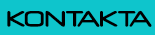
<style>
.page{position:relative;width:155px;height:35px;background:#0ec5cc}
.page>*{position:absolute;margin:0}
.t1{font:26px "Neuropol";color:#000000}
</style>
<div class="page">
<p class="t1" style="left:7px;top:10px;width:145px;height:17px">KONTAKTA</p>
</div>
